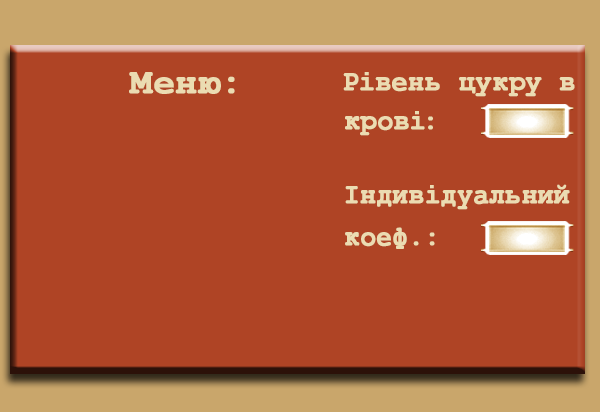
<style>
.page{position:relative;width:600px;height:412px;background:#af4425}
.page>*{position:absolute;margin:0}
.t1{font:36px "NimbusMono-Bold";color:#ebdcb2;font-weight:bold}
.t2{font:28px "NimbusMono-Bold";color:#ebdcb2;font-weight:bold;scale:0.97 1}
.t3{font:28px/36px "NimbusMono-Bold";color:#ebdcb2;font-weight:bold;scale:0.92 1}
</style>
<div class="page">
<p class="t1" style="left:129px;top:72px;width:106px;height:22px">Меню:</p>
<p class="t2" style="left:343px;top:72px;width:232px;height:64px">Рівень цукру в <br>крові:</p>
<p class="t3" style="left:345px;top:184px;width:225px;height:65px">Індивідуальний <br>коеф.:</p>
</div>
